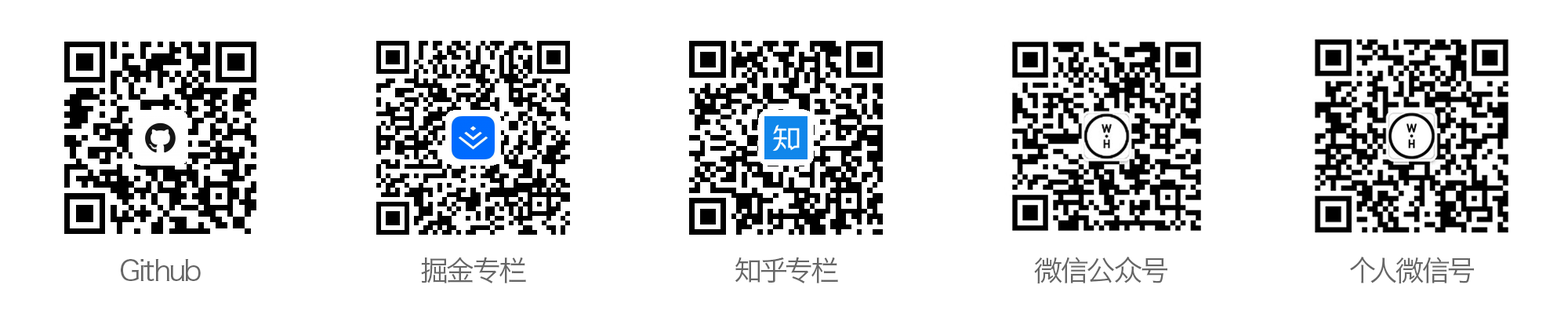
<style>
.page{position:relative;width:1568px;height:314px;background:#ffffff}
.page>*{position:absolute;margin:0}
.t1{font:28.2px "HiraginoSansGB-W3";color:#666666}
</style>
<div class="page">
<p class="t1" style="left:421px;top:256px;width:105px;height:27px">掘金专栏</p>
<p class="t1" style="left:735px;top:256px;width:103px;height:27px">知乎专栏</p>
<p class="t1" style="left:1034px;top:256px;width:133px;height:28px">微信公众号</p>
<p class="t1" style="left:1350px;top:256px;width:124px;height:28px">个人微信号</p>
<p class="t1" style="left:121px;top:259px;width:80px;height:22px">Github</p>
</div>
